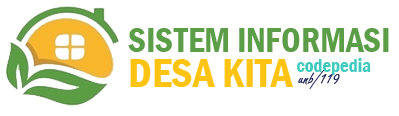
<style>
.page{position:relative;width:399px;height:116px;background:#ffffff}
.page>*{position:absolute;margin:0}
.t1{font:35.1px "FranklinGothic-DemiCond";letter-spacing:-0.005em;color:#5c9d48}
.t2{font:42px "FranklinGothic-DemiCond";letter-spacing:-0.005em;color:#ffc311}
.t3{font:19px "FranklinGothic-DemiCond";letter-spacing:-0.005em;color:#43cabf}
.t4{font:19px "FreestyleScript-Regular";letter-spacing:-0.005em;color:#1e2458}
</style>
<div class="page">
<p class="t1" style="left:128px;top:28px;width:261px;height:24px">SISTEM INFORMASI</p>
<p class="t2" style="left:130px;top:59px;width:163px;height:28px">DESA KITA</p>
<p class="t3" style="left:297px;top:58px;width:74px;height:17px">codepedia</p>
<p class="t4" style="left:298px;top:70px;width:42px;height:19px">unb/119</p>
</div>
